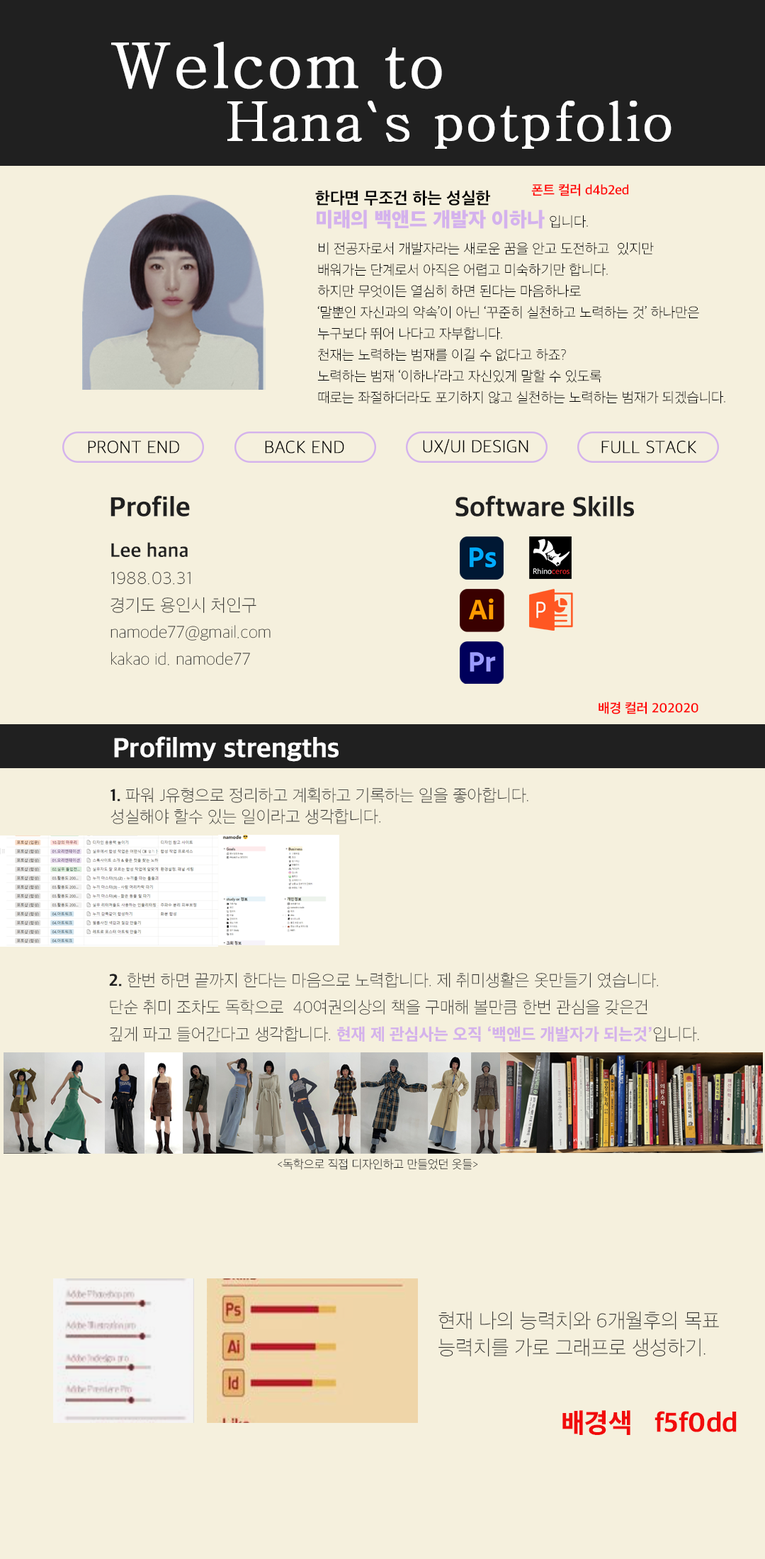
<style>
.page{position:relative;width:765px;height:1559px;background:#f5f0dd}
.page>*{position:absolute;margin:0}
.t1{font:53.8px/46px "AdobeMyungjoStd-Medium";color:#ffffff;font-weight:bold}
.t2{font:62.3px/53.1px "AdobeMyungjoStd-Medium";color:#ffffff;font-weight:bold}
.t3{font:13.5px "AppleSDGothicNeoSB00";color:#ff0000}
.t4{font:20.5px/22.7px "AppleSDGothicNeoH00";color:#d4b2ed}
.t5{font:17px/50.3px "AppleSDGothicNeoB00";color:#000000}
.t6{font:14.2px/22.7px "AppleSDGothicNeoT00";color:#000000}
.t7{font:14.2px/21.3px "AppleSDGothicNeoT00";color:#000000}
.t8{font:17.8px "AppleSDGothicNeoT00";color:#000000;font-weight:bold}
.t9{font:27.6px "AppleSDGothicNeoEB00";color:#202020}
.t10{font:17.7px/26.9px "AppleSDGothicNeoT00";color:#202020}
.t11{font:19.8px/50.3px "AppleSDGothicNeoB00";color:#202020}
.t12{font:27.6px "AppleSDGothicNeoEB00";color:#ffffff}
.t13{font:17px/26.9px "AppleSDGothicNeoT00";color:#202020}
.t14{font:17px/26.9px "AppleSDGothicNeoEB00";color:#202020}
.t15{font:17px/21.3px "AppleSDGothicNeoT00";color:#202020}
.t16{font:17px/26.9px "AppleSDGothicNeoEB00";color:#d4b2eb}
.t17{font:12px "AppleSDGothicNeoT00";color:#202020}
.t18{font:20.5px/26.9px "AppleSDGothicNeoT00";color:#202020}
.t19{font:27.6px "AppleSDGothicNeoEB00";color:#f10b0b}
</style>
<div class="page">
<p class="t1" style="left:111px;top:42px;width:561px;height:107px"><span class="t2">Welcom to <br>     </span> Hana`s potpfolio</p>
<p class="t3" style="left:531px;top:183px;width:98px;height:13px">폰트 컬러 d4b2ed</p>
<p class="t4" style="left:315px;top:190px;width:273px;height:39px"><span class="t5">한다면 무조건 하는 성실한  <br></span>미래의 백앤드 개발자 이하나 <span class="t6">입니다.</span></p>
<p class="t7" style="left:317px;top:242px;width:408px;height:162px">비 전공자로서 개발자라는 새로운 꿈을 안고 도전하고  있지만<br>배워가는 단계로서 아직은 어렵고 미숙하기만 합니다.<br>하지만 무엇이든 열심히 하면 된다는 마음하나로 <br>‘말뿐인 자신과의 약속’이 아닌 ‘꾸준히 실천하고 노력하는 것’ 하나만은<br>누구보다 뛰어 나다고 자부합니다.<br>천재는 노력하는 범재를 이길 수 없다고 하죠?<br>노력하는 범재 ‘이하나’라고 자신있게 말할 수 있도록 <br>때로는 좌절하더라도 포기하지 않고 실천하는 노력하는 범재가 되겠습니다.</p>
<p class="t8" style="left:88px;top:440px;width:91px;height:13px">PRONT END</p>
<p class="t8" style="left:265px;top:440px;width:79px;height:13px">BACK END</p>
<p class="t8" style="left:423px;top:439px;width:105px;height:15px">UX/UI DESIGN</p>
<p class="t8" style="left:601px;top:440px;width:95px;height:13px">FULL STACK</p>
<p class="t9" style="left:111px;top:495px;width:79px;height:21px">Profile</p>
<p class="t9" style="left:456px;top:495px;width:178px;height:21px">Software Skills</p>
<p class="t10" style="left:111px;top:542px;width:160px;height:123px"><span class="t11">Lee hana<br></span>1988.03.31<br>경기도 용인시 처인구<br>namode77@gmail.com<br>kakao id. namode77</p>
<p class="t3" style="left:599px;top:701px;width:100px;height:13px">배경 컬러 202020</p>
<p class="t12" style="left:114px;top:736px;width:225px;height:26px">Profilmy strengths</p>
<p class="t13" style="left:111px;top:787px;width:417px;height:37px"><span class="t14">1.</span> 파워 J유형으로 정리하고 계획하고 기록하는 일을 좋아합니다.<br><span class="t15">성실해야 할수 있는 일이라고 생각합니다.</span></p>
<p class="t13" style="left:109px;top:972px;width:590px;height:69px"><span class="t14">2.</span> 한번 하면 끝까지 한다는 마음으로 노력합니다. 제 취미생활은 옷만들기 였습니다.<br>단순 취미 조차도 독학으로  40여권의상의 책을 구매해 볼만큼 한번 관심을 갖은건<br>깊게 파고 들어간다고 생각합니다. <span class="t16">현재 제 관심사는 오직 ‘백앤드 개발자가 되는것’</span>입니다.</p>
<p class="t17" style="left:278px;top:1158px;width:200px;height:12px">&lt;독학으로 직접 디자인하고 만들었던 옷들&gt;</p>
<p class="t18" style="left:439px;top:1311px;width:280px;height:46px">현재 나의 능력치와 6개월후의 목표 <br>능력치를 가로 그래프로 생성하기.</p>
<p class="t19" style="left:562px;top:1410px;width:175px;height:25px">배경색   f5f0dd</p>
</div>
